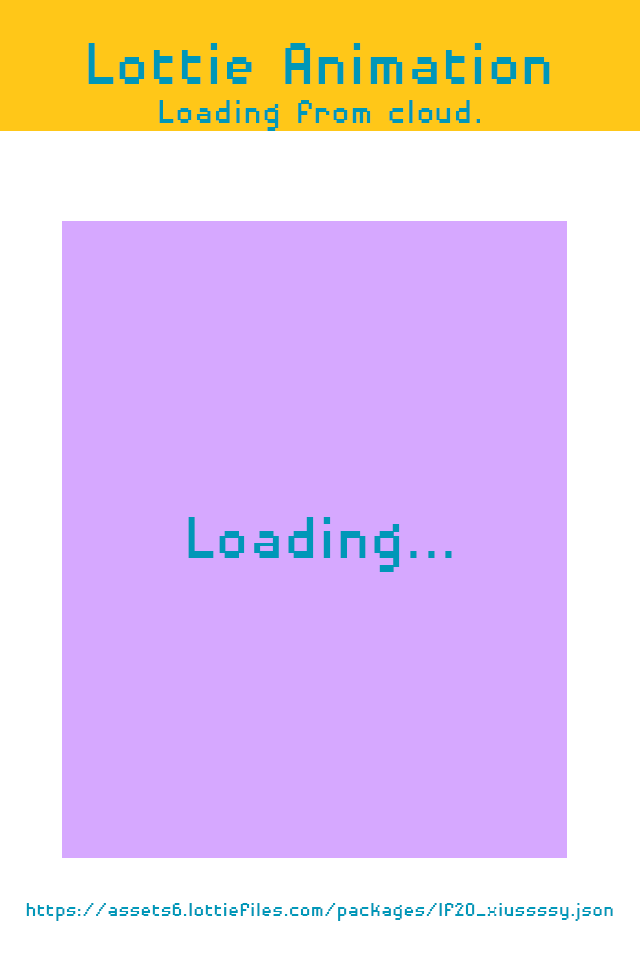
<style>
.page{position:relative;width:640px;height:960px;background:#d6a8ff}
.page>*{position:absolute;margin:0}
.t1{font:76.6px "DisposableDroidBB";color:#0097b8;scale:0.91 1}
.t2{font:43.1px "DisposableDroidBB";color:#0097b8;scale:0.91 1}
.t3{font:25px "DisposableDroidBB";color:#0097b8;scale:0.91 1}
</style>
<div class="page">
<p class="t1" style="left:88px;top:43px;width:462px;height:41px">Lottie Animation</p>
<p class="t2" style="left:159px;top:100px;width:321px;height:31px">Loading from cloud.</p>
<p class="t3" style="left:26px;top:903px;width:587px;height:18px">https://assets6.lottiefiles.com/packages/lf20_xiussssy.json</p>
</div>
